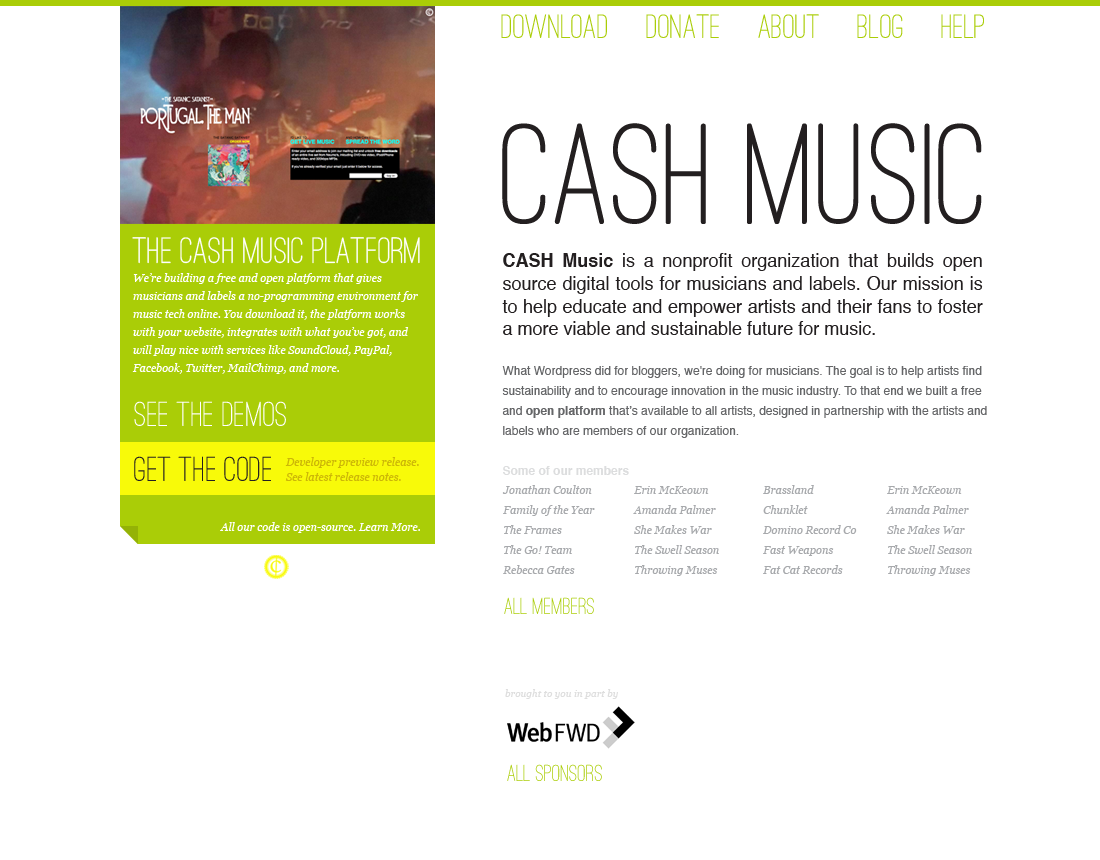
<style>
.page{position:relative;width:1100px;height:860px;background:#ffffff}
.page>*{position:absolute;margin:0}
.t1{font:35px "OstrichSansRounded-Medium";color:#aacd07}
.t2{font:149.3px "OstrichSansRounded-Medium";color:#231f20}
.t3{font:38px "OstrichSansRounded-Medium";color:#ffffff}
.t4{font:18.8px/23px "Helvetica";color:#231f20;scale:0.96 1}
.t5{font:18.8px/23px "Helvetica-Bold";color:#231f20;scale:0.96 1}
.t6{font:11px/18px "Georgia-Italic";color:#ffffff}
.t7{font:12px/20px "Helvetica";color:#656668}
.t8{font:12px/20px "Helvetica-Bold";color:#656668}
.t9{font:12px/20px "Helvetica-Bold";color:#dcddde}
.t10{font:36px "OstrichSansRounded-Medium";color:#ffffff}
.t11{font:36px "OstrichSansRounded-Medium";color:#242021}
.t12{font:11px/15px "Georgia-Italic";color:#ccb707}
.t13{font:11px/20px "Georgia-Italic";color:#a7a9ac}
.t14{font:11px "Georgia-Italic";color:#ffffff}
.t15{font:24px "OstrichSansRounded-Medium";color:#aacd07}
.t16{font:10px "Georgia-Italic";color:#dedede}
</style>
<div class="page">
<p class="t1" style="left:501px;top:14px;width:483px;height:24px">Download     Donate     About     Blog     Help</p>
<p class="t2" style="left:502px;top:123px;width:480px;height:101px">CASH Music</p>
<p class="t3" style="left:132px;top:237px;width:288px;height:27px">THE CASH MUSIC PLATFORM</p>
<p class="t4" style="left:502px;top:253px;width:481px;height:82px;text-align:justify"><span class="t5">CASH Music</span> is a nonprofit organization that builds open source digital tools for musicians and labels. Our mission is to help educate and empower artists and their fans to foster a more viable and sustainable future for music.</p>
<p class="t6" style="left:132px;top:273px;width:286px;height:101px">We’re building a free and open platform that gives musicians and labels a no-programming environment for music tech online. You download it, the platform works with your website, integrates with what you’ve got, and will play nice with services like SoundCloud, PayPal, Facebook, Twitter, MailChimp, and more.</p>
<p class="t7" style="left:502px;top:366px;width:485px;height:109px">What Wordpress did for bloggers, we're doing for musicians. The goal is to help artists find sustainability and to encourage innovation in the music industry. To that end we built a free and <span class="t8">open platform</span> that’s available to all artists, designed in partnership with the artists and labels who are members of our organization.<br><br><span class="t9">Some of our members</span></p>
<p class="t10" style="left:134px;top:401px;width:152px;height:25px">See the demos</p>
<p class="t11" style="left:134px;top:456px;width:137px;height:25px">Get the code</p>
<p class="t12" style="left:285px;top:457px;width:134px;height:24px">Developer preview release.<br>See latest release notes.</p>
<p class="t13" style="left:502px;top:485px;width:93px;height:89px">Jonathan Coulton<br>Family of the Year<br>The Frames<br>The Go! Team<br>Rebecca Gates</p>
<p class="t13" style="left:633px;top:486px;width:86px;height:90px">Erin McKeown<br>Amanda Palmer<br>She Makes War<br>The Swell Season<br>Throwing Muses</p>
<p class="t13" style="left:763px;top:485px;width:94px;height:89px">Brassland<br>Chunklet<br>Domino Record Co<br>Fast Weapons<br>Fat Cat Records</p>
<p class="t13" style="left:886px;top:486px;width:86px;height:90px">Erin McKeown<br>Amanda Palmer<br>She Makes War<br>The Swell Season<br>Throwing Muses</p>
<p class="t14" style="left:220px;top:522px;width:200px;height:11px">All our code is open-source. Learn More.</p>
<p class="t15" style="left:504px;top:597px;width:90px;height:17px">All members</p>
<p class="t16" style="left:505px;top:689px;width:113px;height:10px">brought to you in part by</p>
<p class="t15" style="left:507px;top:764px;width:95px;height:17px">all sponsors</p>
</div>
